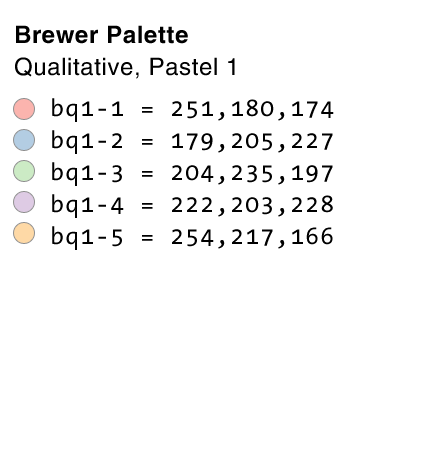
<style>
.page{position:relative;width:443px;height:459px;background:#ffffff}
.page>*{position:absolute;margin:0}
.t1{font:24px/32px "HelveticaLT";letter-spacing:0.025em;color:#000000}
.t2{font:24px/32px "HelveticaLT-Bold";letter-spacing:0.025em;color:#000000}
.t3{font:24px/32px "TheSansMono-Plain";letter-spacing:0.025em;color:#000000}
</style>
<div class="page">
<p class="t1" style="left:15px;top:25px;width:220px;height:54px"><span class="t2">Brewer Palette<br></span>Qualitative, Pastel 1</p>
<p class="t3" style="left:52px;top:98px;width:282px;height:152px">bq1-1 = 251,180,174<br>bq1-2 = 179,205,227<br>bq1-3 = 204,235,197<br>bq1-4 = 222,203,228<br>bq1-5 = 254,217,166</p>
</div>
